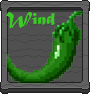
<style>
.page{position:relative;width:90px;height:94px;background:#505050}
.page>*{position:absolute;margin:0}
.t1{font:18px "MaturaMTScriptCapitals";color:#3acc22}
</style>
<div class="page">
<p class="t1" style="left:6px;top:12px;width:49px;height:16px">Wind</p>
</div>
